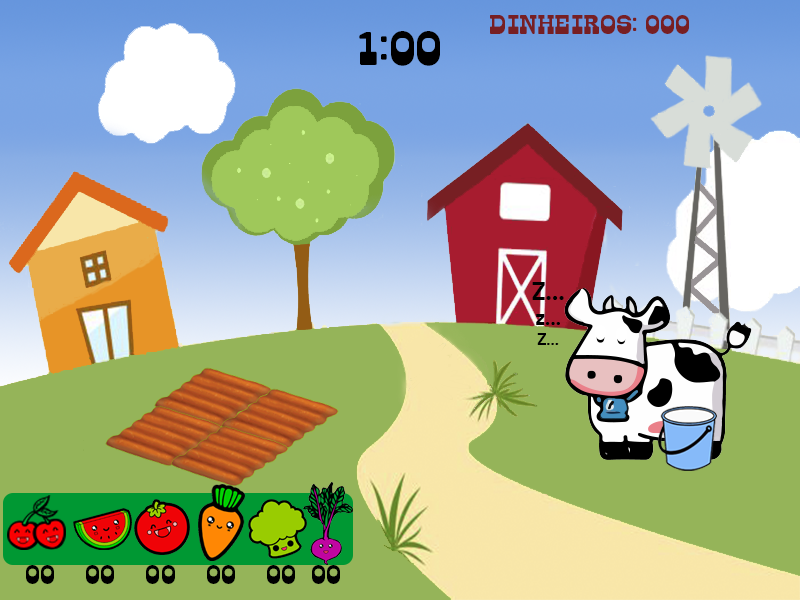
<style>
.page{position:relative;width:800px;height:600px}
.page>*{position:absolute;margin:0}
.t1{font:37.5px "Barn-Bold";color:#771f23}
.t2{font:66.7px "Barn-Bold";color:#000000}
.t3{font:25px "PTSans-Bold";color:#000000}
.t4{font:20.8px "PTSans-Bold";color:#000000}
.t5{font:16.7px "PTSans-Bold";color:#000000}
.t6{font:37.5px "Barn-Bold";color:#000000}
</style>
<div class="page">
<p class="t1" style="left:490px;top:15px;width:199px;height:19px">Dinheiros: 000</p>
<p class="t2" style="left:359px;top:31px;width:81px;height:35px">1:00</p>
<p class="t3" style="left:532px;top:282px;width:32px;height:63px;text-align:center">Z...<br><span class="t4">z...<br></span><span class="t5">Z...</span></p>
<p class="t6" style="left:26px;top:565px;width:314px;height:19px">00    00    00    00    00  00</p>
</div>
